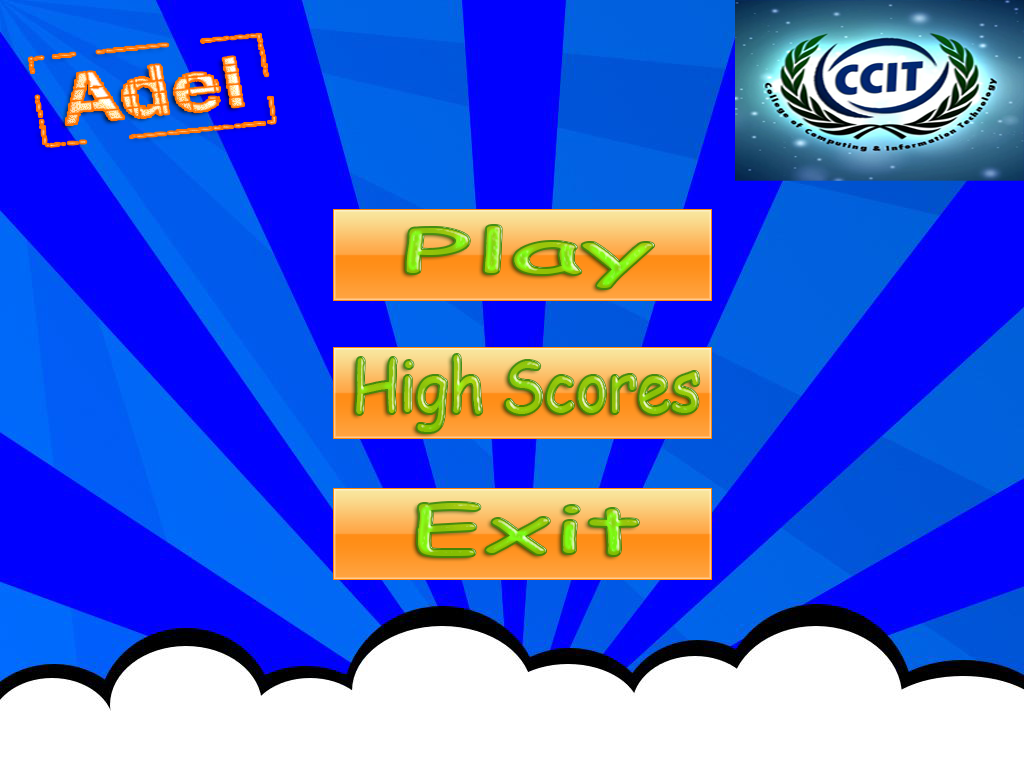
<style>
.page{position:relative;width:1024px;height:768px}
.page>*{position:absolute;margin:0}
.t1{font:58.2px "ComicSansMS";scale:2.41 1}
.t2{font:70.6px "ComicSansMS";color:#95c70b;scale:0.87 1}
.t3{font:63.6px "ComicSansMS";scale:1.85 1}
</style>
<div class="page">
<p class="t1" style="left:406px;top:226px;width:247px;height:62px">Play</p>
<p class="t2" style="left:356px;top:355px;width:343px;height:77px">High Scores</p>
<p class="t3" style="left:418px;top:503px;width:220px;height:53px">Exit</p>
</div>
